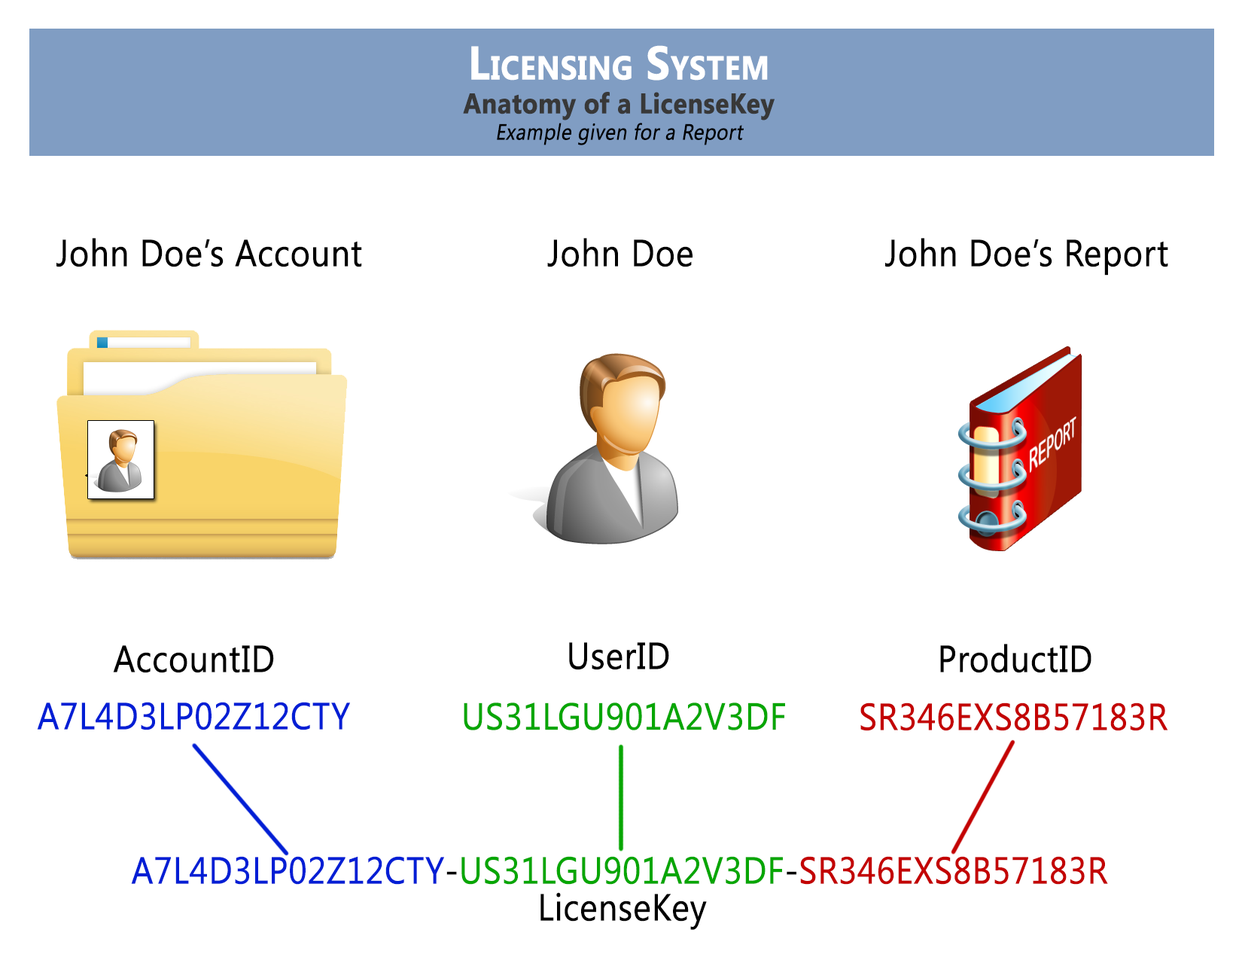
<style>
.page{position:relative;width:1242px;height:960px;background:#ffffff}
.page>*{position:absolute;margin:0}
.t1{font:37.6px "SegoeUI";letter-spacing:-0.005em;color:#000000;font-weight:bold;scale:0.9 1}
.t2{font:37.6px "SegoeUI";letter-spacing:-0.005em;color:#001ed5;font-weight:bold;scale:0.9 1}
.t3{font:37.6px "SegoeUI";letter-spacing:-0.005em;color:#07a603;font-weight:bold;scale:0.9 1}
.t4{font:37.6px "SegoeUI";letter-spacing:-0.005em;color:#c30202;font-weight:bold;scale:0.9 1}
</style>
<div class="page">
<p class="t1" style="left:56px;top:238px;width:306px;height:29px">John Doe’s Account</p>
<p class="t1" style="left:547px;top:238px;width:146px;height:29px">John Doe</p>
<p class="t1" style="left:885px;top:238px;width:283px;height:38px">John Doe’s Report</p>
<p class="t1" style="left:113px;top:645px;width:161px;height:28px">AccountID</p>
<p class="t1" style="left:569px;top:642px;width:100px;height:28px">UserID</p>
<p class="t1" style="left:940px;top:644px;width:152px;height:29px">ProductID</p>
<p class="t2" style="left:37px;top:702px;width:313px;height:28px">A7L4D3LP02Z12CTY</p>
<p class="t3" style="left:464px;top:702px;width:321px;height:28px">US31LGU901A2V3DF</p>
<p class="t4" style="left:861px;top:702px;width:307px;height:29px">SR346EXS8B57183R</p>
<p class="t2" style="left:131px;top:856px;width:977px;height:29px">A7L4D3LP02Z12CTY<span class="t1">-</span><span class="t3">US31LGU901A2V3DF</span><span class="t1">-</span><span class="t4">SR346EXS8B57183R</span></p>
<p class="t1" style="left:541px;top:892px;width:166px;height:38px">LicenseKey</p>
</div>
